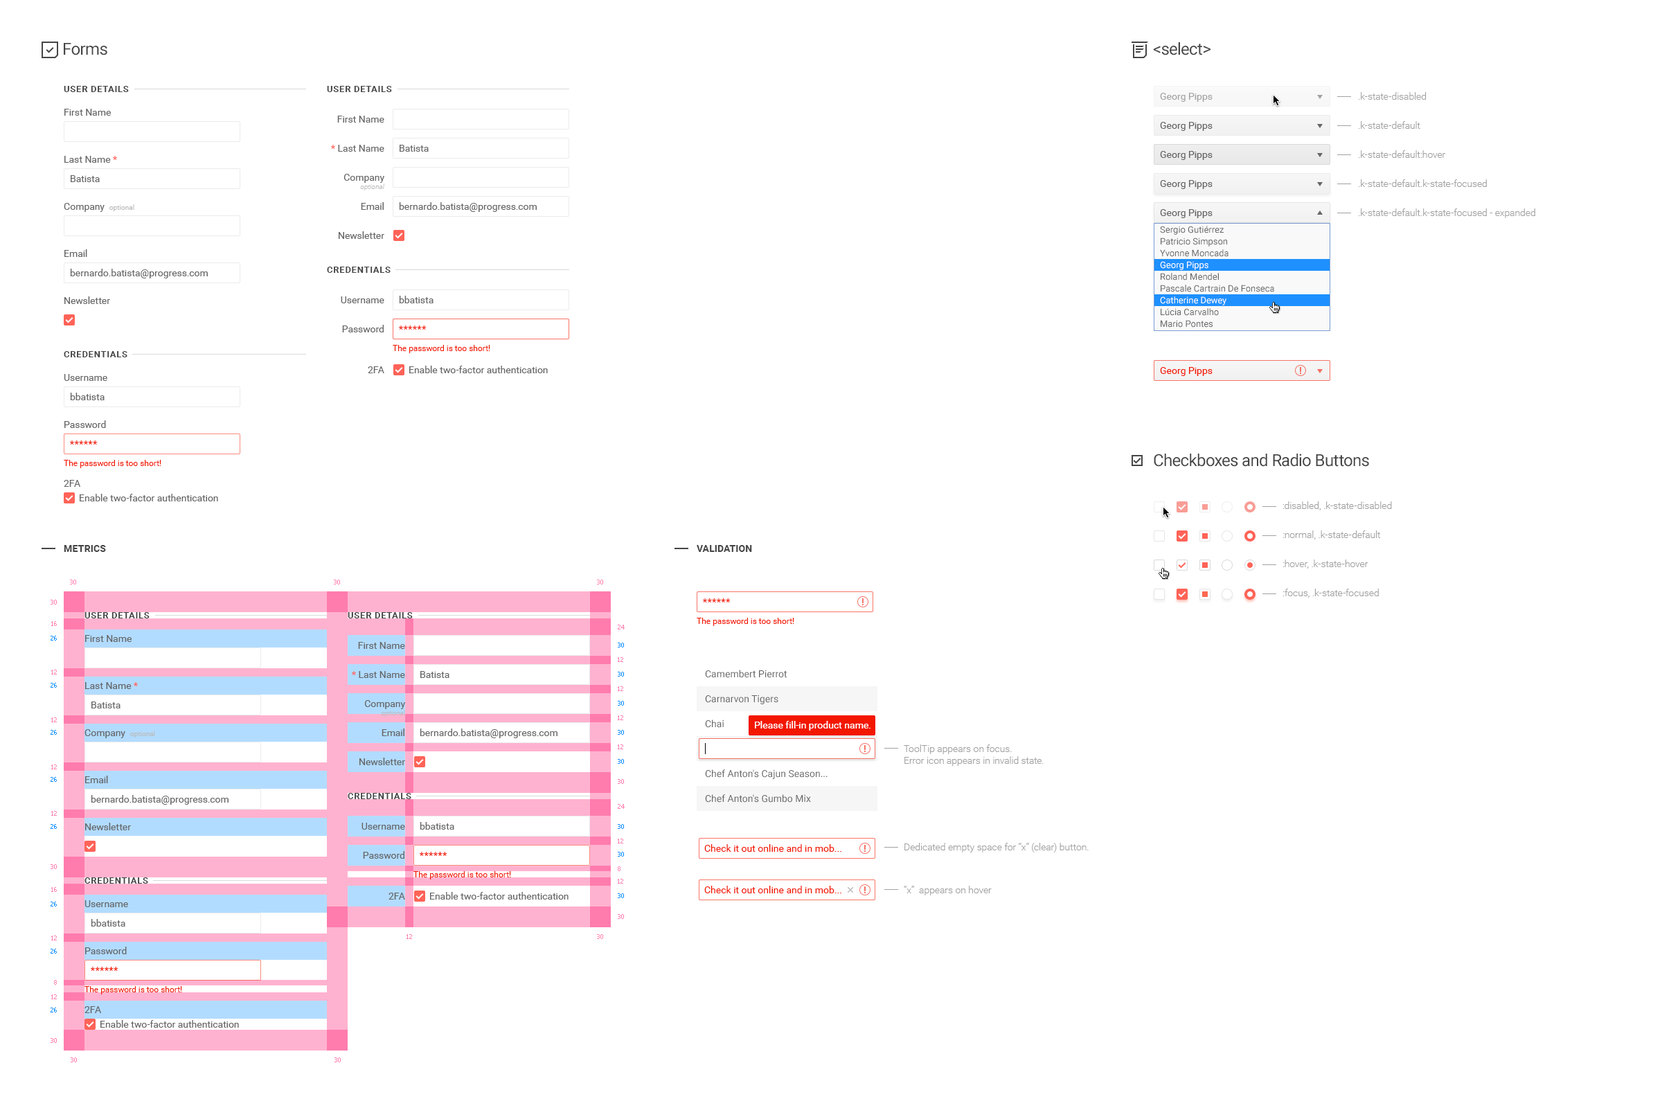
<style>
.page{position:relative;width:1662px;height:1108px;background:#ffffff}
.page>*{position:absolute;margin:0}
.t1{font:16.6px "Roboto-Regular";letter-spacing:-0.025em;color:#454545}
.t2{font:9px "Roboto-Bold";letter-spacing:0.05em;color:#454545;text-transform:uppercase}
.t3{font:9.7px "Roboto-Regular";color:#a3a3a3}
.t4{font:9.7px/29.1px "Roboto-Light";color:#a1a1a1}
.t5{font:9.7px/47.1px "Roboto-Regular";color:#656565}
.t6{font:9.7px/49.8px "Roboto-Regular";color:#656565}
.t7{font:9.7px/47.1px "Roboto-Regular";color:#ff6358}
.t8{font:6.9px/47.1px "Roboto-Regular";color:#bababa}
.t9{font:9.7px/29.1px "Roboto-Regular";color:#656565}
.t10{font:9.7px/29.1px "Roboto-Regular";color:#ff6358}
.t11{font:6.9px/8.3px "Roboto-LightItalic";color:#bababa}
.t12{font:9.7px/20.8px "Roboto-Regular";color:#656565}
.t13{font:9.7px "Roboto-Regular";color:#656565}
.t14{font:9px/11.8px "Roboto-Regular";color:#656565}
.t15{font:9px/11.8px "Roboto-Regular";color:#ffffff}
.t16{font:9.7px/40.8px "Roboto-Regular";color:#656565}
.t17{font:9.7px "Roboto-Regular";color:#f31700}
.t18{font:8.3px "Roboto-Regular";color:#f31700}
.t19{font:9.7px/58.8px "Roboto-Regular";color:#656565}
.t20{font:9.7px "Roboto-Bold";letter-spacing:0.01em;color:#454545;text-transform:uppercase}
.t21{font:6.2px "Tahoma";color:#ff7cae}
.t22{font:6.2px "Tahoma";color:#008aff}
.t23{font:9.7px/24.9px "Roboto-Regular";color:#656565}
.t24{font:9.7px "Roboto-Regular";color:#ffffff}
.t25{font:9.7px "Roboto-Light";color:#a1a1a1}
</style>
<div class="page">
<p class="t1" style="left:64px;top:43px;width:43px;height:12px">Forms</p>
<p class="t1" style="left:1153px;top:42px;width:57px;height:13px">&lt;select&gt;</p>
<p class="t2" style="left:64px;top:86px;width:65px;height:6px">User Details</p>
<p class="t2" style="left:327px;top:86px;width:65px;height:6px">User Details</p>
<p class="t3" style="left:1160px;top:93px;width:52px;height:9px">Georg Pipps</p>
<p class="t4" style="left:1358px;top:92px;width:177px;height:126px">.k-state-disabled<br>.k-state-default<br>.k-state-default:hover<br>.k-state-default.k-state-focused<br>.k-state-default.k-state-focused - expanded</p>
<p class="t5" style="left:64px;top:109px;width:70px;height:195px"><span class="t6">First Name<br></span>Last Name <span class="t7">*<br></span>Company  <span class="t8">optional<br></span>Email<br>Newsletter</p>
<p class="t9" style="left:331px;top:116px;width:54px;height:123px;text-align:right"><span class="t6">First Name<br> </span><span class="t10">* </span>Last Name<br>Company<br><span class="t11">optional<br></span><span class="t12">Email<br></span>Newsletter</p>
<p class="t13" style="left:1160px;top:122px;width:52px;height:9px">Georg Pipps</p>
<p class="t13" style="left:399px;top:145px;width:30px;height:7px">Batista</p>
<p class="t13" style="left:1160px;top:151px;width:52px;height:9px">Georg Pipps</p>
<p class="t13" style="left:71px;top:175px;width:29px;height:7px">Batista</p>
<p class="t13" style="left:1160px;top:180px;width:52px;height:9px">Georg Pipps</p>
<p class="t13" style="left:399px;top:202px;width:138px;height:10px">bernardo.batista@progress.com</p>
<p class="t13" style="left:1160px;top:209px;width:52px;height:9px">Georg Pipps</p>
<p class="t14" style="left:1160px;top:226px;width:114px;height:266px">Sergio Gutiérrez<br>Patricio Simpson<br>Yvonne Moncada<br><span class="t15">Georg Pipps<br></span>Roland Mendel<br>Pascale Cartrain De Fonseca<br><span class="t15">Catherine Dewey<br></span>Lúcia Carvalho<br>Mario Pontes<br>Bernardo Batista<br>Pedro Afonso<br>André Fonseca<br>Paula Parente<br>Anabela Domingues<br>Janete Limeira<br>Aria Cruz<br>Jean Fresnière<br>Elizabeth Lincoln<br>Yoshi Tannamuri<br>Palle Ibsen<br>Carlos Hernández<br>Felipe Izquierdo<br>Carlos González</p>
<p class="t13" style="left:70px;top:269px;width:138px;height:9px">bernardo.batista@progress.com</p>
<p class="t2" style="left:327px;top:267px;width:63px;height:6px">Credentials</p>
<p class="t9" style="left:341px;top:296px;width:43px;height:77px;text-align:right">Username<br>Password<br><span class="t16">2FA</span></p>
<p class="t13" style="left:399px;top:296px;width:34px;height:7px">bbatista</p>
<p class="t17" style="left:399px;top:325px;width:27px;height:5px">******</p>
<p class="t2" style="left:64px;top:351px;width:63px;height:6px">Credentials</p>
<p class="t18" style="left:393px;top:345px;width:97px;height:8px">The password is too short!</p>
<p class="t13" style="left:409px;top:366px;width:139px;height:7px">Enable two-factor authentication</p>
<p class="t6" style="left:64px;top:374px;width:43px;height:113px">Username<br><span class="t5">Password<br></span><span class="t19">2FA</span></p>
<p class="t17" style="left:1160px;top:367px;width:52px;height:9px">Georg Pipps</p>
<p class="t13" style="left:70px;top:393px;width:35px;height:7px">bbatista</p>
<p class="t17" style="left:70px;top:440px;width:28px;height:4px">******</p>
<p class="t18" style="left:64px;top:460px;width:97px;height:8px">The password is too short!</p>
<p class="t1" style="left:1153px;top:453px;width:216px;height:14px">Checkboxes and Radio Buttons</p>
<p class="t13" style="left:80px;top:494px;width:138px;height:7px">Enable two-factor authentication</p>
<p class="t4" style="left:1282px;top:501px;width:110px;height:96px">:disabled, .k-state-disabled<br>:normal, .k-state-default<br>:hover, .k-state-hover<br>:focus, .k-state-focused</p>
<p class="t20" style="left:64px;top:545px;width:42px;height:7px">Metrics</p>
<p class="t20" style="left:696px;top:545px;width:56px;height:7px">Validation</p>
<p class="t21" style="left:70px;top:579px;width:6px;height:5px">30</p>
<p class="t21" style="left:334px;top:579px;width:6px;height:5px">30</p>
<p class="t21" style="left:597px;top:579px;width:6px;height:5px">30</p>
<p class="t21" style="left:51px;top:600px;width:6px;height:4px">30</p>
<p class="t17" style="left:703px;top:598px;width:27px;height:4px">******</p>
<p class="t2" style="left:84px;top:612px;width:66px;height:6px">User Details</p>
<p class="t2" style="left:348px;top:612px;width:65px;height:6px">User Details</p>
<p class="t18" style="left:696px;top:618px;width:98px;height:8px">The password is too short!</p>
<p class="t21" style="left:51px;top:621px;width:6px;height:5px">16</p>
<p class="t21" style="left:618px;top:624px;width:6px;height:5px">24</p>
<p class="t22" style="left:51px;top:636px;width:6px;height:4px">26</p>
<p class="t5" style="left:84px;top:635px;width:71px;height:195px"><span class="t6">First Name<br></span>Last Name <span class="t7">*<br></span>Company  <span class="t8">optional<br></span>Email<br>Newsletter</p>
<p class="t9" style="left:352px;top:642px;width:54px;height:123px;text-align:right"><span class="t6">First Name<br> </span><span class="t10">* </span>Last Name<br>Company<br><span class="t11">optional<br></span><span class="t12">Email<br></span>Newsletter</p>
<p class="t22" style="left:618px;top:642px;width:6px;height:5px">30</p>
<p class="t21" style="left:618px;top:657px;width:5px;height:5px">12</p>
<p class="t21" style="left:51px;top:669px;width:6px;height:5px">12</p>
<p class="t13" style="left:420px;top:671px;width:29px;height:7px">Batista</p>
<p class="t22" style="left:618px;top:672px;width:6px;height:4px">30</p>
<p class="t23" style="left:705px;top:669px;width:122px;height:133px">Camembert Pierrot<br>Carnarvon Tigers<br>Chai<br>Chartreuse verte<br>Chef Anton's Cajun Season...<br>Chef Anton's Gumbo Mix</p>
<p class="t22" style="left:51px;top:683px;width:6px;height:4px">26</p>
<p class="t21" style="left:618px;top:686px;width:5px;height:5px">12</p>
<p class="t13" style="left:91px;top:701px;width:29px;height:7px">Batista</p>
<p class="t22" style="left:618px;top:701px;width:6px;height:4px">30</p>
<p class="t21" style="left:51px;top:717px;width:6px;height:5px">12</p>
<p class="t21" style="left:618px;top:715px;width:5px;height:5px">12</p>
<p class="t24" style="left:755px;top:721px;width:115px;height:9px">Please fill-in product name.</p>
<p class="t22" style="left:51px;top:730px;width:6px;height:5px">26</p>
<p class="t13" style="left:420px;top:728px;width:137px;height:10px">bernardo.batista@progress.com</p>
<p class="t22" style="left:618px;top:730px;width:6px;height:5px">30</p>
<p class="t21" style="left:618px;top:744px;width:5px;height:5px">12</p>
<p class="t25" style="left:903px;top:744px;width:140px;height:22px">ToolTip appears on focus.<br>Error icon appears in invalid state.</p>
<p class="t22" style="left:618px;top:759px;width:6px;height:5px">30</p>
<p class="t21" style="left:51px;top:764px;width:6px;height:5px">12</p>
<p class="t22" style="left:51px;top:777px;width:6px;height:5px">26</p>
<p class="t21" style="left:618px;top:779px;width:6px;height:5px">30</p>
<p class="t13" style="left:91px;top:795px;width:137px;height:9px">bernardo.batista@progress.com</p>
<p class="t2" style="left:348px;top:793px;width:63px;height:6px">Credentials</p>
<p class="t21" style="left:618px;top:804px;width:6px;height:5px">24</p>
<p class="t21" style="left:51px;top:811px;width:6px;height:5px">12</p>
<p class="t13" style="left:420px;top:822px;width:34px;height:7px">bbatista</p>
<p class="t22" style="left:51px;top:824px;width:6px;height:5px">26</p>
<p class="t9" style="left:361px;top:822px;width:44px;height:77px;text-align:right">Username<br>Password<br><span class="t16">2FA</span></p>
<p class="t22" style="left:618px;top:824px;width:6px;height:5px">30</p>
<p class="t21" style="left:618px;top:838px;width:5px;height:5px">12</p>
<p class="t17" style="left:704px;top:844px;width:137px;height:8px">Check it out online and in mob...</p>
<p class="t25" style="left:904px;top:843px;width:184px;height:9px">Dedicated empty space for “x” (clear) button.</p>
<p class="t17" style="left:420px;top:852px;width:27px;height:4px">******</p>
<p class="t22" style="left:618px;top:852px;width:6px;height:4px">30</p>
<p class="t21" style="left:51px;top:864px;width:6px;height:5px">30</p>
<p class="t21" style="left:618px;top:866px;width:2px;height:5px">8</p>
<p class="t2" style="left:84px;top:877px;width:64px;height:6px">Credentials</p>
<p class="t18" style="left:413px;top:871px;width:98px;height:8px">The password is too short!</p>
<p class="t21" style="left:618px;top:879px;width:5px;height:4px">12</p>
<p class="t21" style="left:51px;top:887px;width:6px;height:5px">16</p>
<p class="t13" style="left:430px;top:892px;width:138px;height:7px">Enable two-factor authentication</p>
<p class="t22" style="left:618px;top:893px;width:6px;height:5px">30</p>
<p class="t17" style="left:704px;top:885px;width:137px;height:8px">Check it out online and in mob...</p>
<p class="t25" style="left:903px;top:885px;width:88px;height:10px">“x”  appears on hover</p>
<p class="t22" style="left:51px;top:901px;width:6px;height:5px">26</p>
<p class="t6" style="left:84px;top:900px;width:44px;height:113px">Username<br><span class="t5">Password<br></span><span class="t19">2FA</span></p>
<p class="t21" style="left:618px;top:914px;width:6px;height:5px">30</p>
<p class="t13" style="left:91px;top:919px;width:34px;height:7px">bbatista</p>
<p class="t21" style="left:51px;top:935px;width:6px;height:5px">12</p>
<p class="t21" style="left:406px;top:934px;width:6px;height:5px">12</p>
<p class="t21" style="left:597px;top:934px;width:6px;height:5px">30</p>
<p class="t22" style="left:51px;top:948px;width:6px;height:5px">26</p>
<p class="t17" style="left:91px;top:966px;width:27px;height:5px">******</p>
<p class="t21" style="left:54px;top:980px;width:3px;height:4px">8</p>
<p class="t18" style="left:84px;top:986px;width:98px;height:8px">The password is too short!</p>
<p class="t21" style="left:51px;top:994px;width:6px;height:5px">12</p>
<p class="t22" style="left:51px;top:1007px;width:6px;height:5px">26</p>
<p class="t13" style="left:100px;top:1020px;width:139px;height:7px">Enable two-factor authentication</p>
<p class="t21" style="left:51px;top:1038px;width:6px;height:5px">30</p>
<p class="t21" style="left:71px;top:1057px;width:6px;height:5px">30</p>
<p class="t21" style="left:334px;top:1057px;width:7px;height:5px">30</p>
</div>
